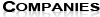
<style>
.page{position:relative;width:100px;height:17px;background:#ffffff}
.page>*{position:absolute;margin:0}
.t1{font:15px "Arial-BoldMT";color:#000000;scale:1.35 1}
.t2{font:11px "Arial-BoldMT";color:#000000;scale:1.44 1}
.t3{font:15px "Arial-BoldMT";color:#000000;scale:1.44 1}
</style>
<div class="page">
<p class="t1" style="left:3px;top:1px;width:13px;height:11px">C</p>
<p class="t2" style="left:16px;top:3px;width:84px;height:8px"><span class="t3"> </span>OMPANIES</p>
</div>
